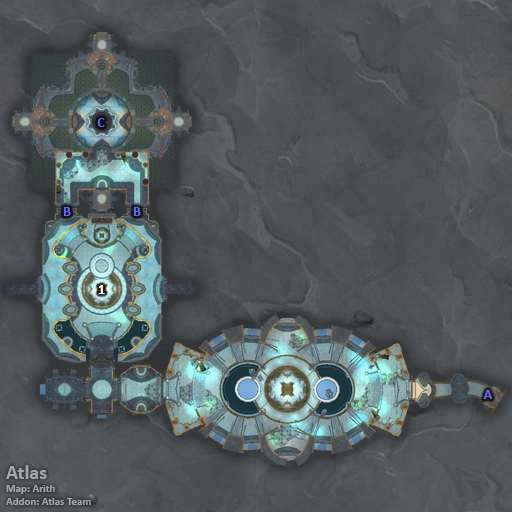
<style>
.page{position:relative;width:512px;height:512px}
.page>*{position:absolute;margin:0}
.t1{font:14px "Calibri-Bold";color:#6666ff}
.t2{font:14px "Calibri-Bold";color:#ffffff}
.t3{font:11px "Calibri-Bold";color:#a5a6a8}
.t4{font:20px "Calibri-Bold";color:#a5a6a8}
</style>
<div class="page">
<p class="t1" style="left:97px;top:118px;width:8px;height:9px">C</p>
<p class="t1" style="left:63px;top:207px;width:8px;height:9px">B</p>
<p class="t1" style="left:133px;top:207px;width:8px;height:9px">B</p>
<p class="t2" style="left:98px;top:285px;width:7px;height:9px">1</p>
<p class="t1" style="left:483px;top:390px;width:9px;height:9px">A</p>
<p class="t3" style="left:6px;top:465px;width:85px;height:40px"><span class="t4">Atlas<br></span>Map: Arith<br>Addon: Atlas Team</p>
</div>
